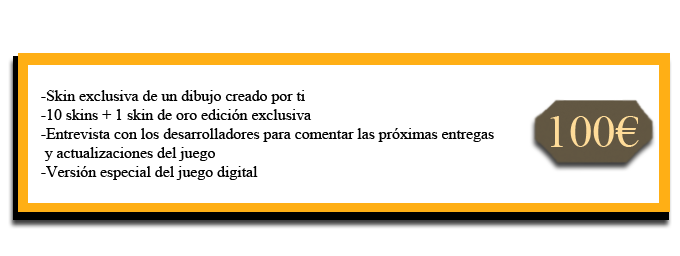
<style>
.page{position:relative;width:680px;height:256px;background:#ffffff}
.page>*{position:absolute;margin:0}
.t1{font:15.8px "TimesNewRomanPSMT";color:#000000}
.t2{font:46.8px "TimesNewRomanPSMT";color:#ffdc99}
</style>
<div class="page">
<p class="t1" style="left:41px;top:90px;width:453px;height:90px">-Skin exclusiva de un dibujo creado por ti<br>-10 skins + 1 skin de oro edición exclusiva<br>-Entrevista con los desarrolladores para comentar las próximas entregas<br> y actualizaciones del juego<br>-Versión especial del juego digital</p>
<p class="t2" style="left:550px;top:116px;width:89px;height:31px">100€</p>
</div>
